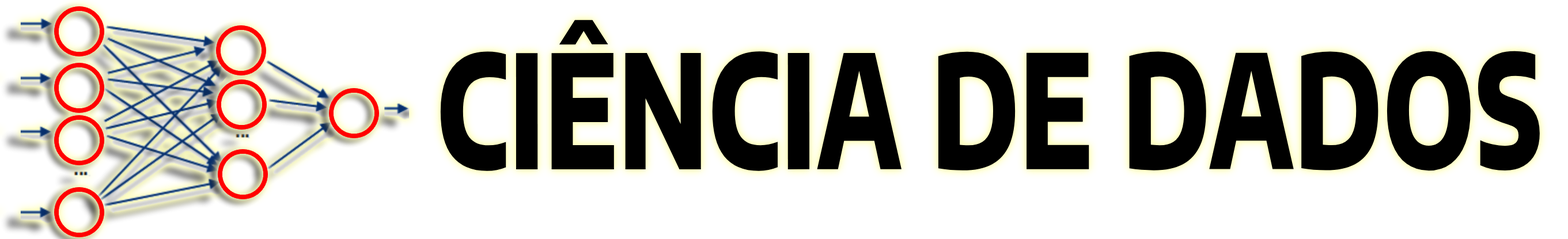
<style>
.page{position:relative;width:1568px;height:239px;background:#ffffff}
.page>*{position:absolute;margin:0}
.t1{font:157.2px "EncodeSansSemiExpanded-ExtraBold";color:#000000;scale:0.68 1}
</style>
<div class="page">
<p class="t1" style="left:440px;top:20px;width:1100px;height:151px">CIÊNCIA DE DADOS</p>
</div>
